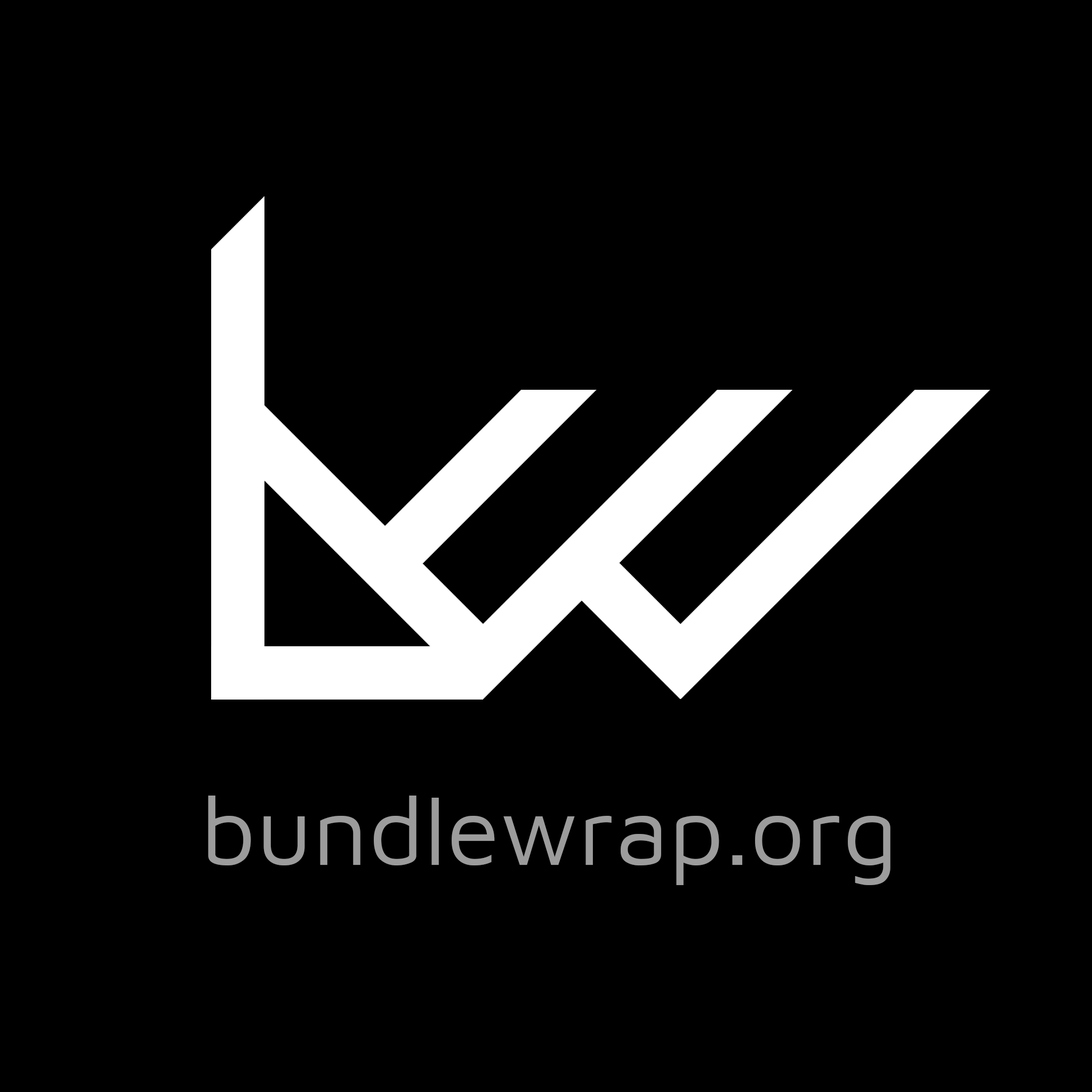
<style>
.page{position:relative;width:1092px;height:1092px;background:#000000}
.page>*{position:absolute;margin:0}
.t1{font:97.8px "MavenPro-Regular";color:#9c9c9c}
</style>
<div class="page">
<p class="t1" style="left:208px;top:796px;width:682px;height:89px">bundlewrap.org</p>
</div>
